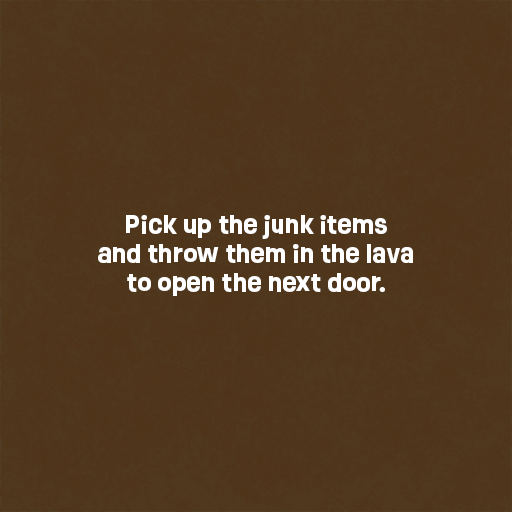
<style>
.page{position:relative;width:512px;height:512px;background:#4f351a}
.page>*{position:absolute;margin:0}
.t1{font:24px "Ruddy-Bold";color:#ffffff}
</style>
<div class="page">
<p class="t1" style="left:98px;top:215px;width:315px;height:81px;text-align:center">Pick up the junk items<br>and throw them in the lava<br>to open the next door.</p>
</div>
